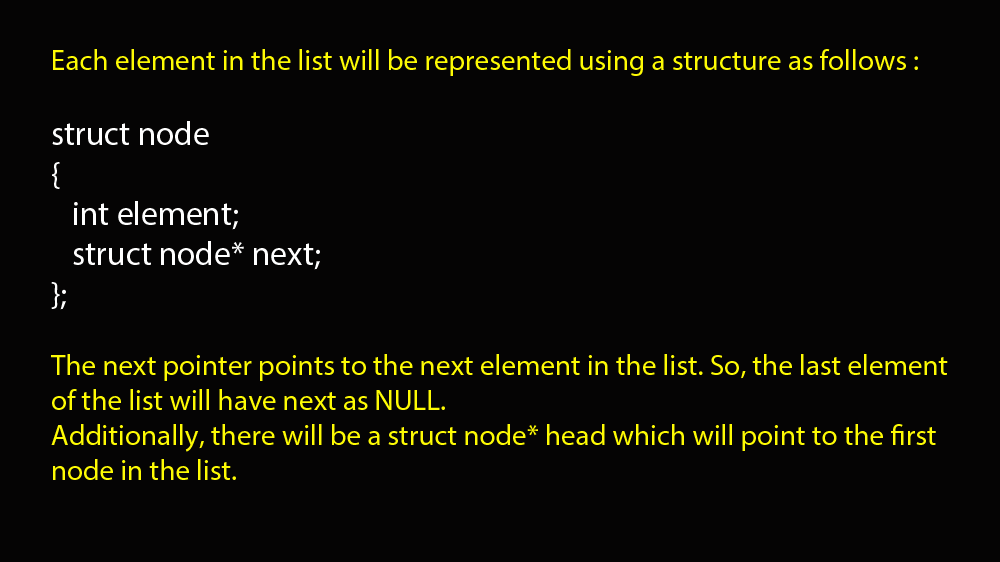
<style>
.page{position:relative;width:1000px;height:562px;background:#050404}
.page>*{position:absolute;margin:0}
.t1{font:29.2px "MyriadPro-Regular";color:#fefb04}
.t2{font:33.3px "MyriadPro-Regular";color:#ffffff}
</style>
<div class="page">
<p class="t1" style="left:51px;top:49px;width:897px;height:431px">Each element in the list will be represented using a structure as follows :<br><br><span class="t2">struct node<br>{<br>   int element;<br>   struct node* next;<br>};<br></span><br>The next pointer points to the next element in the list. So, the last element of the list will have next as NULL.<br>Additionally, there will be a struct node* head which will point to the first node in the list.</p>
</div>
